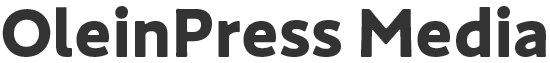
<style>
.page{position:relative;width:550px;height:63px;background:#ffffff}
.page>*{position:absolute;margin:0}
.t1{font:64.6px "PA1GothicStd-Bold";color:#333333}
</style>
<div class="page">
<p class="t1" style="left:2px;top:6px;width:544px;height:51px">OleinPress Media</p>
</div>
